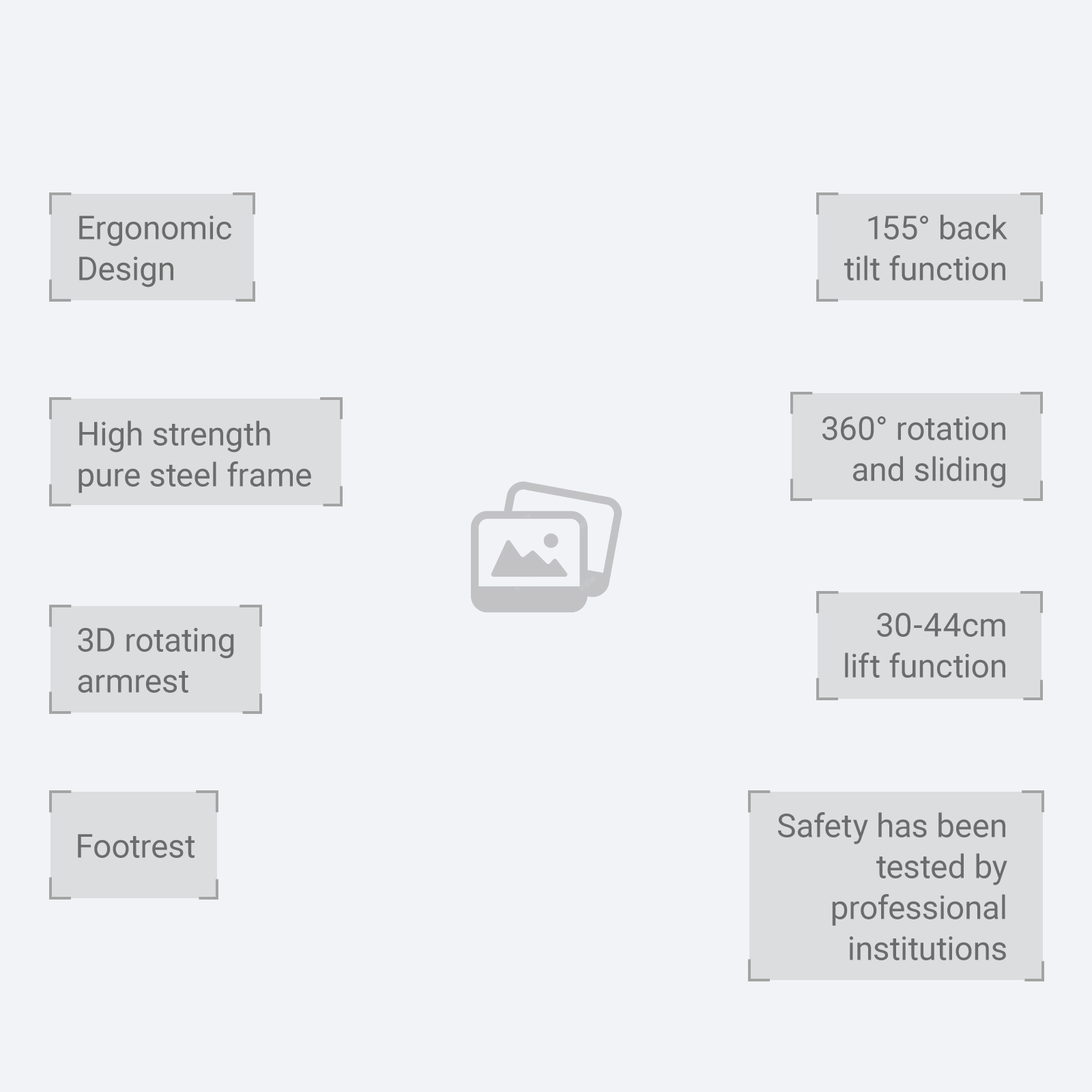
<style>
.page{position:relative;width:1092px;height:1092px;background:#f2f3f6}
.page>*{position:absolute;margin:0}
.t1{font:32.8px/40.9px "Roboto-Regular";color:#6c6c6c}
.t2{font:32.8px "Roboto-Regular";color:#6c6c6c}
</style>
<div class="page">
<p class="t1" style="left:79px;top:216px;width:152px;height:71px">Ergonomic<br>Design</p>
<p class="t1" style="left:844px;top:214px;width:163px;height:67px;text-align:right">155° back<br>tilt function</p>
<p class="t1" style="left:78px;top:420px;width:233px;height:73px">High strength<br>pure steel frame</p>
<p class="t1" style="left:822px;top:416px;width:183px;height:72px;text-align:right">360° rotation<br>and sliding</p>
<p class="t1" style="left:845px;top:613px;width:160px;height:65px;text-align:right">30-44cm<br>lift function</p>
<p class="t1" style="left:78px;top:628px;width:156px;height:65px">3D rotating<br>armrest</p>
<p class="t1" style="left:778px;top:812px;width:229px;height:148px;text-align:right">Safety has been<br>tested by<br>professional<br>institutions</p>
<p class="t2" style="left:78px;top:834px;width:117px;height:24px">Footrest</p>
</div>
